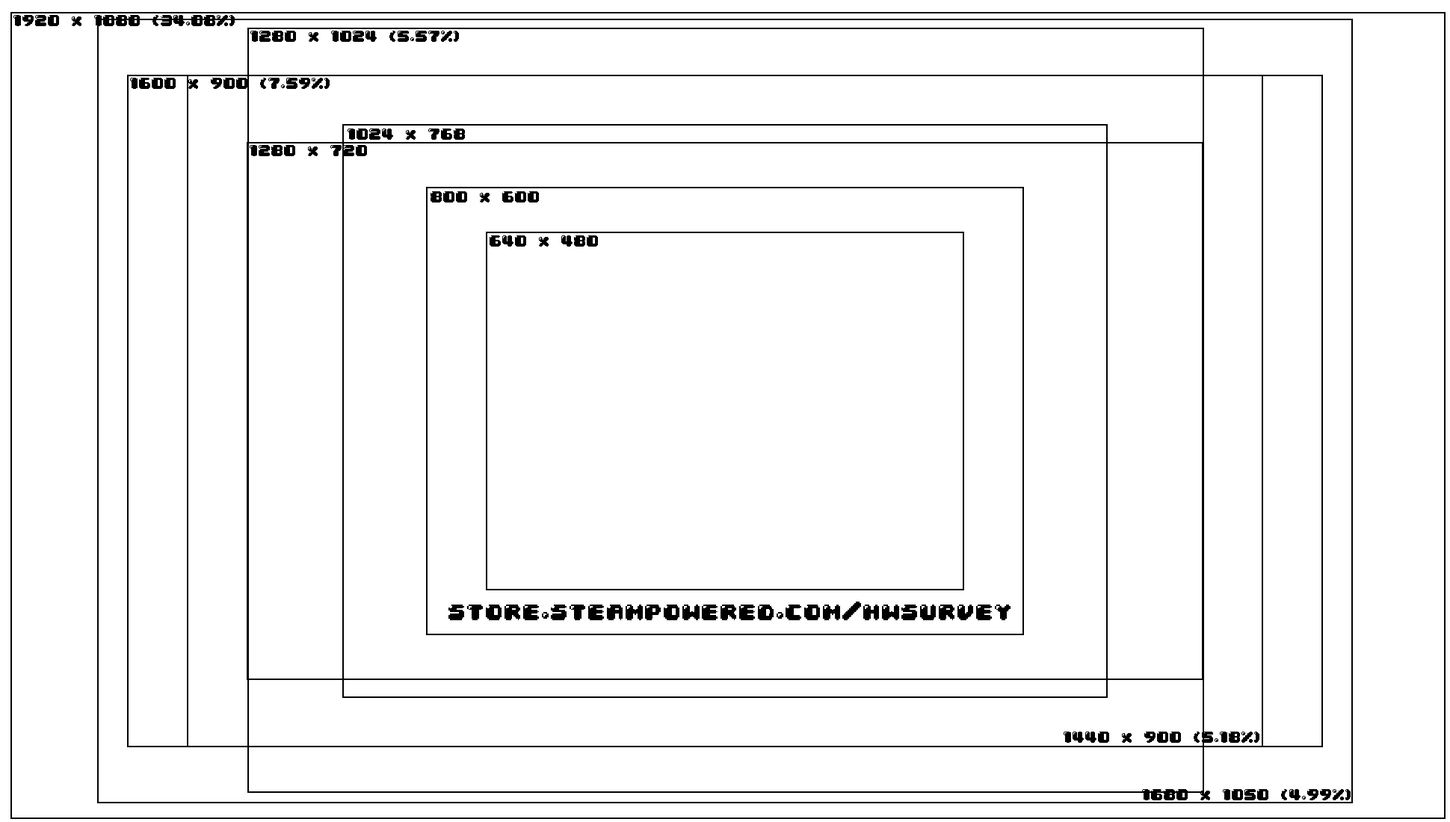
<style>
.page{position:relative;width:1450px;height:822px;background:#ffffff}
.page>*{position:absolute;margin:0}
.t1{font:13.5px "04b30";color:#000000}
.t2{font:22.4px "04b30";color:#000000}
</style>
<div class="page">
<p class="t1" style="left:13px;top:15px;width:222px;height:11px">1920 x 1080 (34.08%)</p>
<p class="t1" style="left:250px;top:31px;width:209px;height:11px">1280 x 1024 (5.57%)</p>
<p class="t1" style="left:130px;top:78px;width:200px;height:11px">1600 x 900 (7.59%)</p>
<p class="t1" style="left:348px;top:129px;width:117px;height:11px">1024 x 768</p>
<p class="t1" style="left:250px;top:145px;width:117px;height:11px">1280 x 720</p>
<p class="t1" style="left:431px;top:191px;width:108px;height:12px">800 x 600</p>
<p class="t1" style="left:490px;top:235px;width:108px;height:12px">640 x 480</p>
<p class="t2" style="left:449px;top:602px;width:562px;height:18px">store.steampowered.com/hwsurvey</p>
<p class="t1" style="left:1064px;top:732px;width:196px;height:11px">1440 x 900 (5.18%)</p>
<p class="t1" style="left:1142px;top:789px;width:209px;height:12px">1680 x 1050 (4.99%)</p>
</div>
